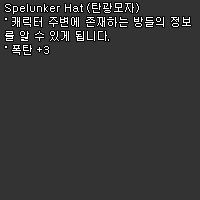
<style>
.page{position:relative;width:200px;height:200px;background:#333333}
.page>*{position:absolute;margin:0}
.t1{font:11px/14px "Dotum";color:#ffffff}
</style>
<div class="page">
<p class="t1" style="left:5px;top:3px;width:186px;height:52px">Spelunker Hat (탄광모자)<br>˚ 캐릭터 주변에 존재하는 방들의 정보<br>를 알 수 있게 됩니다.<br>˚ 폭탄 +3</p>
</div>
